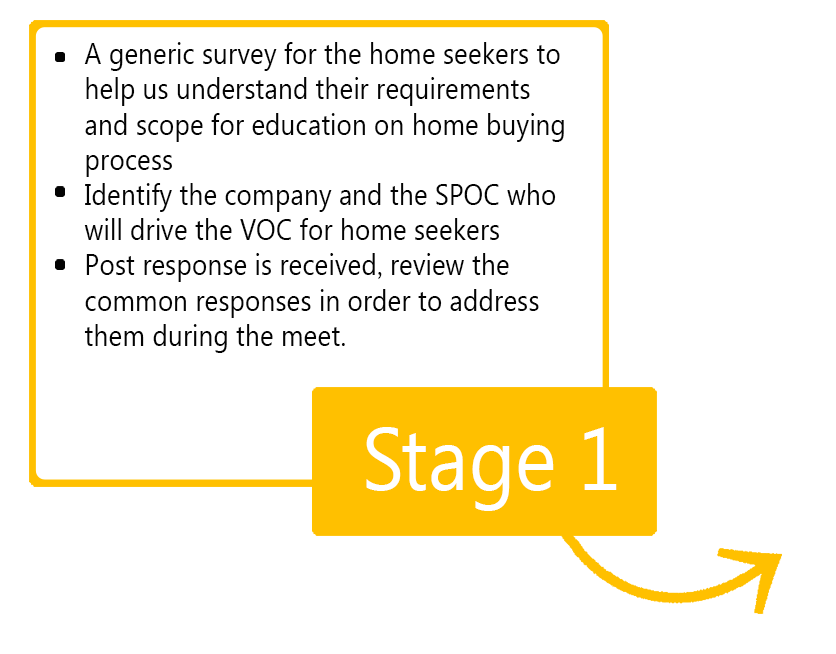
<style>
.page{position:relative;width:836px;height:654px;background:#ffffff}
.page>*{position:absolute;margin:0}
.t1{font:29.3px "SegoeUI";color:#030303;scale:0.9 1}
.t2{font:88px "SegoeUI";color:#ffffff;scale:0.9 1}
</style>
<div class="page">
<p class="t1" style="left:84px;top:42px;width:480px;height:311px">A generic survey for the home seekers to<br>    help us understand their requirements<br>    and scope for education on home buying<br>    process<br>    Identify the company and the SPOC who<br>    will drive the VOC for home seekers<br>    Post response is received, review the<br>    common responses in order to address<br>    them during the meet.</p>
<p class="t2" style="left:366px;top:427px;width:251px;height:84px">Stage 1</p>
</div>
